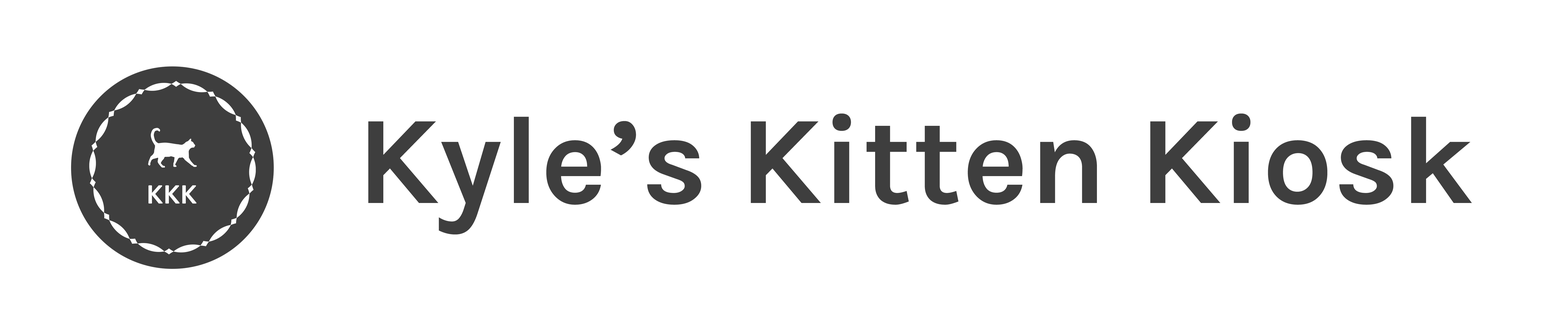
<style>
.page{position:relative;width:1568px;height:335px;background:#ffffff}
.page>*{position:absolute;margin:0}
.t1{font:125.7px "Karla-Bold";color:#3e3e3e}
</style>
<div class="page">
<p class="t1" style="left:368px;top:114px;width:1104px;height:121px">Kyle’s Kitten Kiosk</p>
</div>
